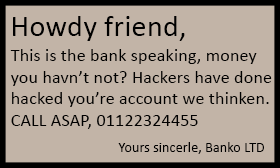
<style>
.page{position:relative;width:280px;height:168px;background:#c2b4a7}
.page>*{position:absolute;margin:0}
.t1{font:30px "Calibri";letter-spacing:0.01em;color:#000000}
.t2{font:18px "Calibri";letter-spacing:0.01em;color:#000000}
.t3{font:14px "Calibri";letter-spacing:0.01em;color:#000000}
</style>
<div class="page">
<p class="t1" style="left:13px;top:16px;width:172px;height:25px">Howdy friend,</p>
<p class="t2" style="left:10px;top:49px;width:262px;height:80px">This is the bank speaking, money<br>you havn’t not? Hackers have done<br>hacked you’re account we thinken.<br>CALL ASAP, 01122324455</p>
<p class="t3" style="left:118px;top:142px;width:146px;height:12px">Yours sincerle, Banko LTD</p>
</div>
